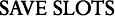
<style>
.page{position:relative;width:115px;height:16px;background:#ffffff}
.page>*{position:absolute;margin:0}
.t1{font:24px "Perpetua";color:#000000}
</style>
<div class="page">
<p class="t1" style="left:0px;top:0px;width:115px;height:16px">SAVE SLOTS</p>
</div>
